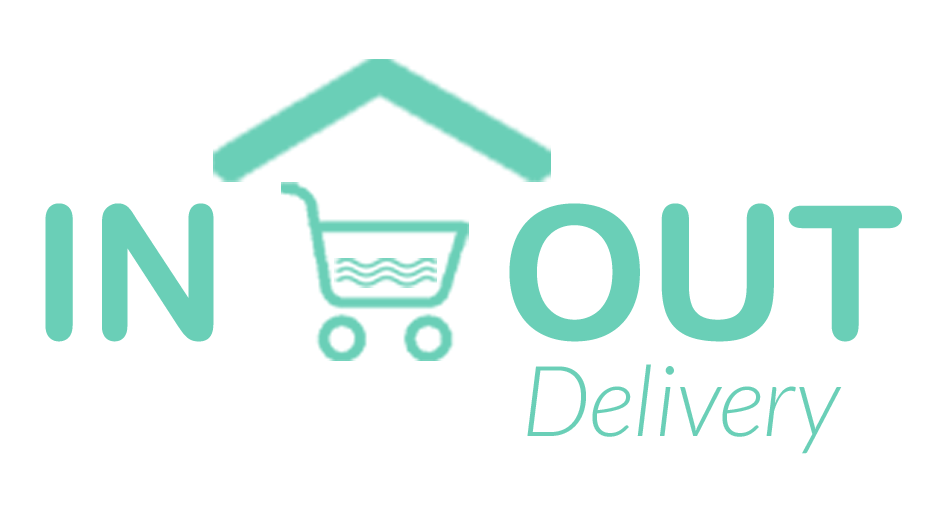
<style>
.page{position:relative;width:947px;height:512px;background:#ffffff}
.page>*{position:absolute;margin:0}
.t1{font:186px "ArialRoundedMTBold";letter-spacing:-0.005em;color:#6acfb7}
.t2{font:98.1px "Lato-LightItalic";letter-spacing:-0.005em;color:#6acfb7}
</style>
<div class="page">
<p class="t1" style="left:45px;top:203px;width:857px;height:139px">IN      OUT</p>
<p class="t2" style="left:527px;top:364px;width:315px;height:90px">Delivery</p>
</div>
